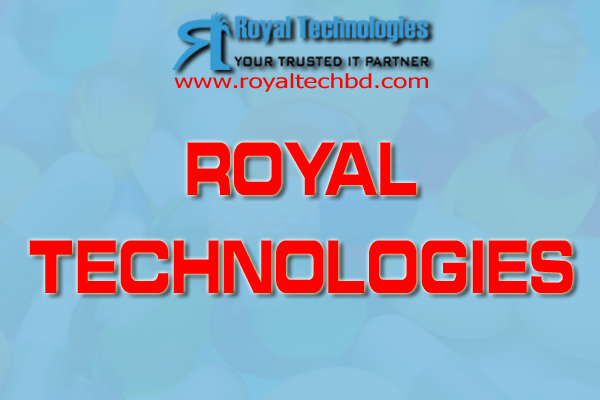
<style>
.page{position:relative;width:600px;height:400px}
.page>*{position:absolute;margin:0}
.t1{font:19.3px "Tahoma";color:#ff0101;scale:1.36 1}
.t2{font:81px "RoyalTechnologies";color:#ff0000;scale:0.71 1}
</style>
<div class="page">
<p class="t1" style="left:174px;top:73px;width:254px;height:19px">www.royaltechbd.com</p>
<p class="t2" style="left:29px;top:142px;width:544px;height:151px;text-align:center">ROYAL<br>TECHNOLOGIES</p>
</div>
